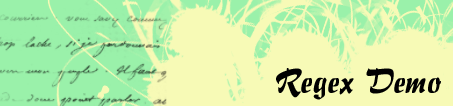
<style>
.page{position:relative;width:453px;height:106px;background:#f7fab6}
.page>*{position:absolute;margin:0}
.t1{font:36px "BrushFlair";color:#000000}
</style>
<div class="page">
<p class="t1" style="left:276px;top:68px;width:165px;height:32px">Regex Demo</p>
</div>
